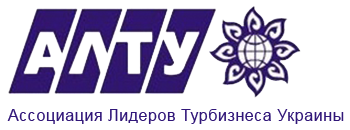
<style>
.page{position:relative;width:350px;height:130px;background:#ffffff}
.page>*{position:absolute;margin:0}
.t1{font:16px "ArialMT";letter-spacing:0.035em;color:#311779}
</style>
<div class="page">
<p class="t1" style="left:7px;top:109px;width:337px;height:15px">Ассоциация Лидеров Турбизнеса Украины</p>
</div>
